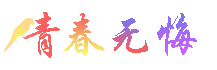
<style>
.page{position:relative;width:217px;height:70px;background:#ffffff}
.page>*{position:absolute;margin:0}
.t1{font:48px "STXingkai";color:#fa5f5f}
.t2{font:48px "STXingkai"}
</style>
<div class="page">
<p class="t1" style="left:23px;top:12px;width:37px;height:46px">青</p>
<p class="t2" style="left:63px;top:13px;width:42px;height:43px">春</p>
<p class="t2" style="left:157px;top:13px;width:40px;height:43px">悔</p>
<p class="t2" style="left:112px;top:18px;width:36px;height:35px">无</p>
</div>
